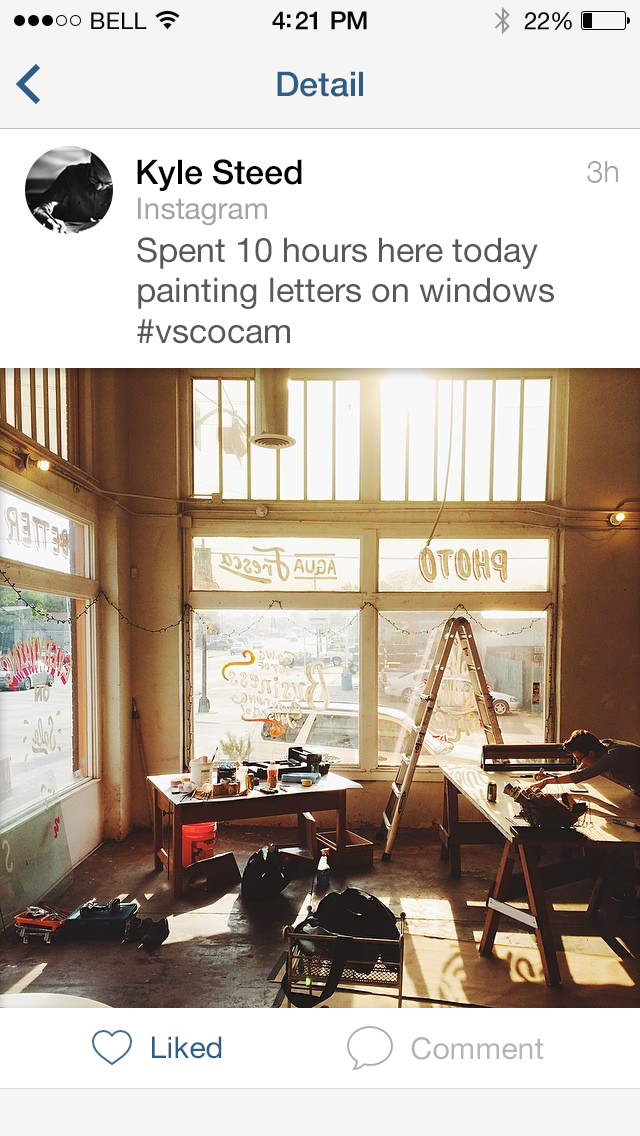
<style>
.page{position:relative;width:640px;height:1136px;background:#ffffff}
.page>*{position:absolute;margin:0}
.t1{font:23px "HelveticaNeue";letter-spacing:0.02em;color:#060606}
.t2{font:25px "HelveticaNeue-Medium";letter-spacing:-0.02em;color:#060606}
.t3{font:24px "HelveticaNeue";letter-spacing:-0.02em;color:#060606}
.t4{font:34px "HelveticaNeue-Medium";color:#2e5e86}
.t5{font:34px "HelveticaNeue-Medium";color:#000000}
.t6{font:30px "HelveticaNeue-Light";color:#a3a3a3}
.t7{font:30px "HelveticaNeue";color:#a3a3a3}
.t8{font:34px "HelveticaNeue";color:#585858}
.t9{font:30px "HelveticaNeue";color:#2e5e86}
.t10{font:30px "HelveticaNeue";color:#b5b5b5}
</style>
<div class="page">
<p class="t1" style="left:91px;top:12px;width:56px;height:17px">BELL</p>
<p class="t2" style="left:272px;top:11px;width:95px;height:19px">4:21 PM</p>
<p class="t3" style="left:524px;top:12px;width:48px;height:18px">22%</p>
<p class="t4" style="left:277px;top:71px;width:86px;height:26px">Detail</p>
<p class="t5" style="left:137px;top:159px;width:165px;height:32px">Kyle Steed</p>
<p class="t6" style="left:587px;top:161px;width:31px;height:22px">3h</p>
<p class="t7" style="left:138px;top:197px;width:129px;height:29px">Instagram</p>
<p class="t8" style="left:137px;top:237px;width:417px;height:107px">Spent 10 hours here today <br>painting letters on windows<br>#vscocam</p>
<p class="t9" style="left:152px;top:1036px;width:70px;height:23px">Liked</p>
<p class="t10" style="left:411px;top:1037px;width:133px;height:23px">Comment</p>
</div>
